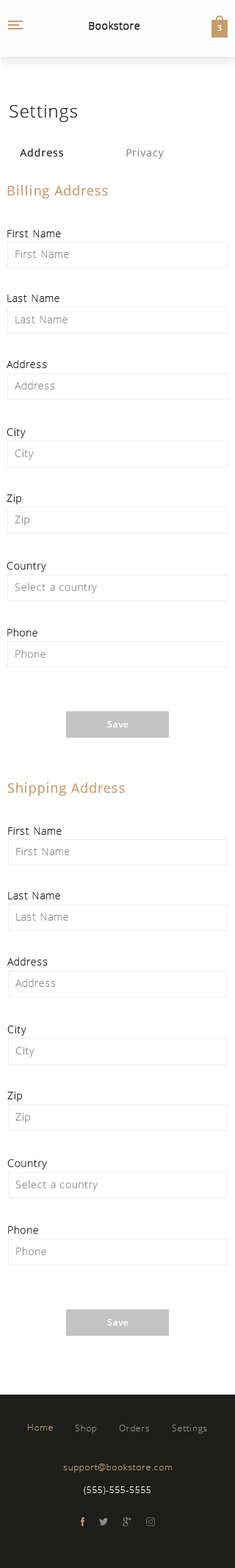
<style>
.page{position:relative;width:235px;height:1568px;background:#ffffff}
.page>*{position:absolute;margin:0}
.t1{font:17.6px "OpenSans-Light";letter-spacing:0.05em;color:#1e1e1c}
.t2{font:10.3px "OpenSans";letter-spacing:0.05em;color:#1e1e1c}
.t3{font:10.3px "OpenSans";letter-spacing:0.05em;color:#8c8c8c}
.t4{font:13.2px "OpenSans";letter-spacing:0.05em;color:#c69c6d}
.t5{font:10.3px "OpenSans-Light";letter-spacing:0.05em;color:#1e1e1c}
.t6{font:10.3px "OpenSans-Light";letter-spacing:0.05em;color:#8c8c8c}
.t7{font:10.4px "OpenSans-Light";letter-spacing:0.05em}
.t8{font:10.4px "OpenSans-Light";letter-spacing:0.05em;color:#8c8c8c}
.t9{font:10.4px "OpenSans-Light";letter-spacing:0.05em;color:#1e1e1c}
.t10{font:8.8px "OpenSans-Semibold";letter-spacing:0.05em;color:#fffefe}
</style>
<div class="page">
<p class="t1" style="left:10px;top:105px;width:67px;height:17px">Settings</p>
<p class="t2" style="left:20px;top:148px;width:43px;height:9px">Address</p>
<p class="t3" style="left:126px;top:148px;width:38px;height:11px">Privacy</p>
<p class="t4" style="left:7px;top:185px;width:101px;height:13px">Billing Address</p>
<p class="t5" style="left:7px;top:230px;width:54px;height:7px">First Name</p>
<p class="t6" style="left:15px;top:251px;width:54px;height:7px">First Name</p>
<p class="t5" style="left:7px;top:295px;width:53px;height:7px">Last Name</p>
<p class="t6" style="left:15px;top:316px;width:53px;height:7px">Last Name</p>
<p class="t5" style="left:7px;top:360px;width:40px;height:8px">Address</p>
<p class="t6" style="left:15px;top:381px;width:40px;height:8px">Address</p>
<p class="t7" style="left:7px;top:428px;width:19px;height:11px">City</p>
<p class="t8" style="left:15px;top:449px;width:19px;height:11px">City</p>
<p class="t9" style="left:7px;top:494px;width:14px;height:11px">Zip</p>
<p class="t8" style="left:15px;top:515px;width:14px;height:11px">Zip</p>
<p class="t7" style="left:7px;top:561px;width:39px;height:11px">Country</p>
<p class="t8" style="left:15px;top:583px;width:82px;height:11px">Select a country</p>
<p class="t7" style="left:7px;top:628px;width:30px;height:9px">Phone</p>
<p class="t8" style="left:15px;top:650px;width:31px;height:8px">Phone</p>
<p class="t10" style="left:107px;top:721px;width:21px;height:6px">Save</p>
<p class="t4" style="left:8px;top:783px;width:117px;height:13px">Shipping Address</p>
<p class="t5" style="left:8px;top:827px;width:54px;height:8px">First Name</p>
<p class="t6" style="left:16px;top:848px;width:54px;height:7px">First Name</p>
<p class="t5" style="left:8px;top:892px;width:52px;height:7px">Last Name</p>
<p class="t6" style="left:16px;top:913px;width:52px;height:8px">Last Name</p>
<p class="t5" style="left:7px;top:957px;width:41px;height:8px">Address</p>
<p class="t6" style="left:15px;top:979px;width:41px;height:8px">Address</p>
<p class="t7" style="left:7px;top:1025px;width:19px;height:11px">City</p>
<p class="t8" style="left:15px;top:1046px;width:20px;height:11px">City</p>
<p class="t9" style="left:7px;top:1091px;width:15px;height:11px">Zip</p>
<p class="t8" style="left:15px;top:1112px;width:15px;height:11px">Zip</p>
<p class="t7" style="left:7px;top:1159px;width:40px;height:11px">Country</p>
<p class="t8" style="left:15px;top:1180px;width:83px;height:11px">Select a country</p>
<p class="t7" style="left:8px;top:1226px;width:30px;height:8px">Phone</p>
<p class="t8" style="left:16px;top:1247px;width:30px;height:9px">Phone</p>
<p class="t10" style="left:107px;top:1319px;width:21px;height:7px">Save</p>
</div>
